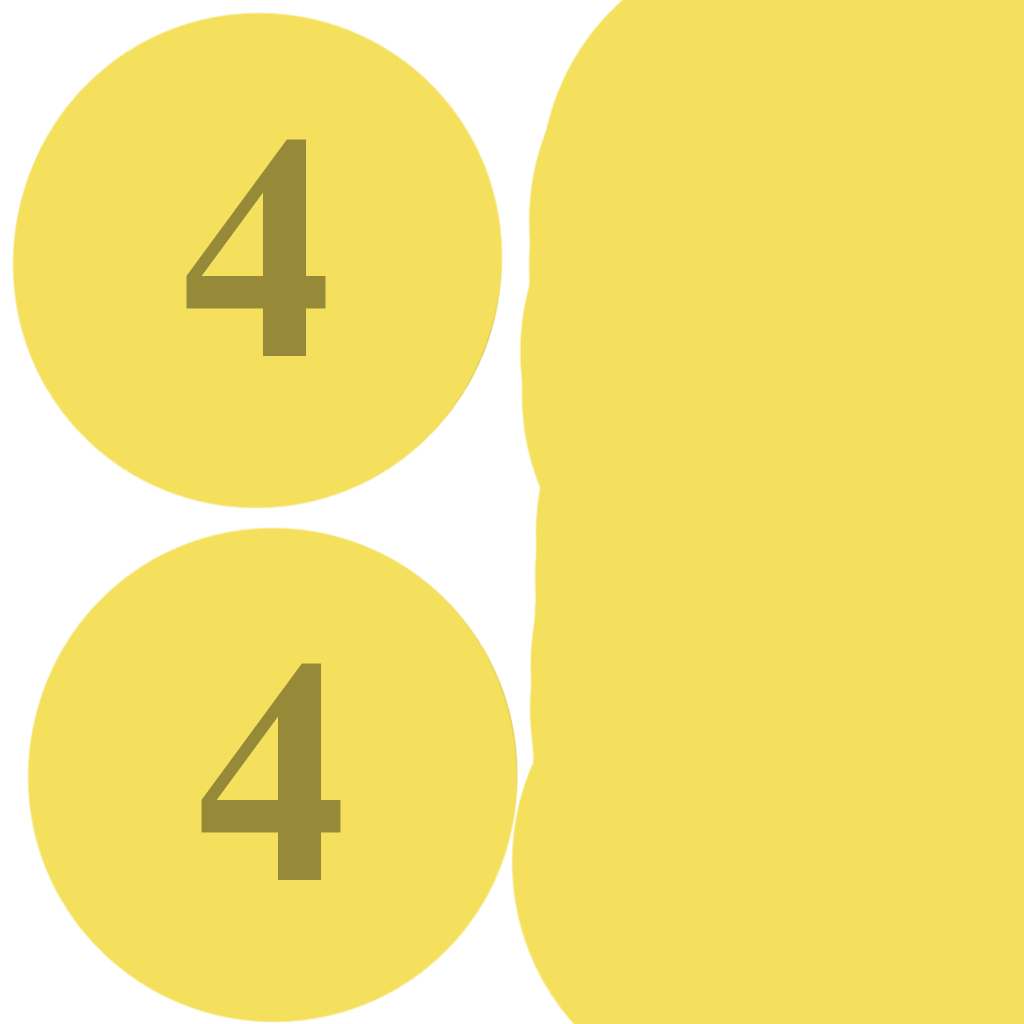
<style>
.page{position:relative;width:1024px;height:1024px;background:#f4e05d}
.page>*{position:absolute;margin:0}
.t1{font:320px "TimesNewRomanPS-BoldMT";letter-spacing:-0.02em;color:#968a39}
.t2{font:24px "TimesNewRomanPS-BoldMT";letter-spacing:-0.02em;color:#968a39}
</style>
<div class="page">
<p class="t1" style="left:186px;top:139px;width:140px;height:217px"><span class="t2"><br><br><br><br><br><br><br><br><br><br><br><br><br><br><br><br><br><br><br><br><br><br><br><br><br><br><br><br><br><br><br><br><br><br></span><br><br><br><br><br>4</p>
<p class="t1" style="left:201px;top:663px;width:140px;height:217px"><span class="t2"><br><br><br><br><br><br><br><br><br><br><br><br><br><br><br><br><br><br><br><br><br><br><br><br><br><br><br><br><br><br><br><br><br><br></span><br><br><br><br><br>4</p>
</div>
